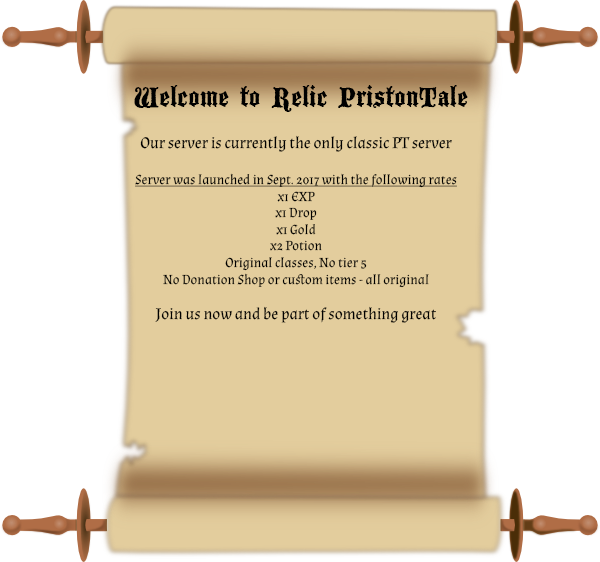
<style>
.page{position:relative;width:600px;height:562px;background:#ffffff}
.page>*{position:absolute;margin:0}
.t1{font:30px "BlackwoodCastle";color:#000000}
.t2{font:13.8px "Almendra-Regular";color:#000000}
.t3{font:16.1px "Almendra-Regular";color:#000000}
.t4{font:13.8px "Almendra-Regular";color:#000000;text-decoration:underline}
</style>
<div class="page">
<p class="t1" style="left:134px;top:85px;width:334px;height:27px">Welcome to Relic PristonTale</p>
<p class="t2" style="left:135px;top:135px;width:322px;height:188px;text-align:center"><span class="t3">Our server is currently the only classic PT server<br><br></span><span class="t4">Server was launched in Sept. 2017 with the following rates<br></span>x1 EXP<br>x1 Drop<br>x1 Gold<br>x2 Potion<br>Original classes, No tier 5<br>No Donation Shop or custom items - all original<br><br><span class="t3">Join us now and be part of something great</span></p>
</div>
